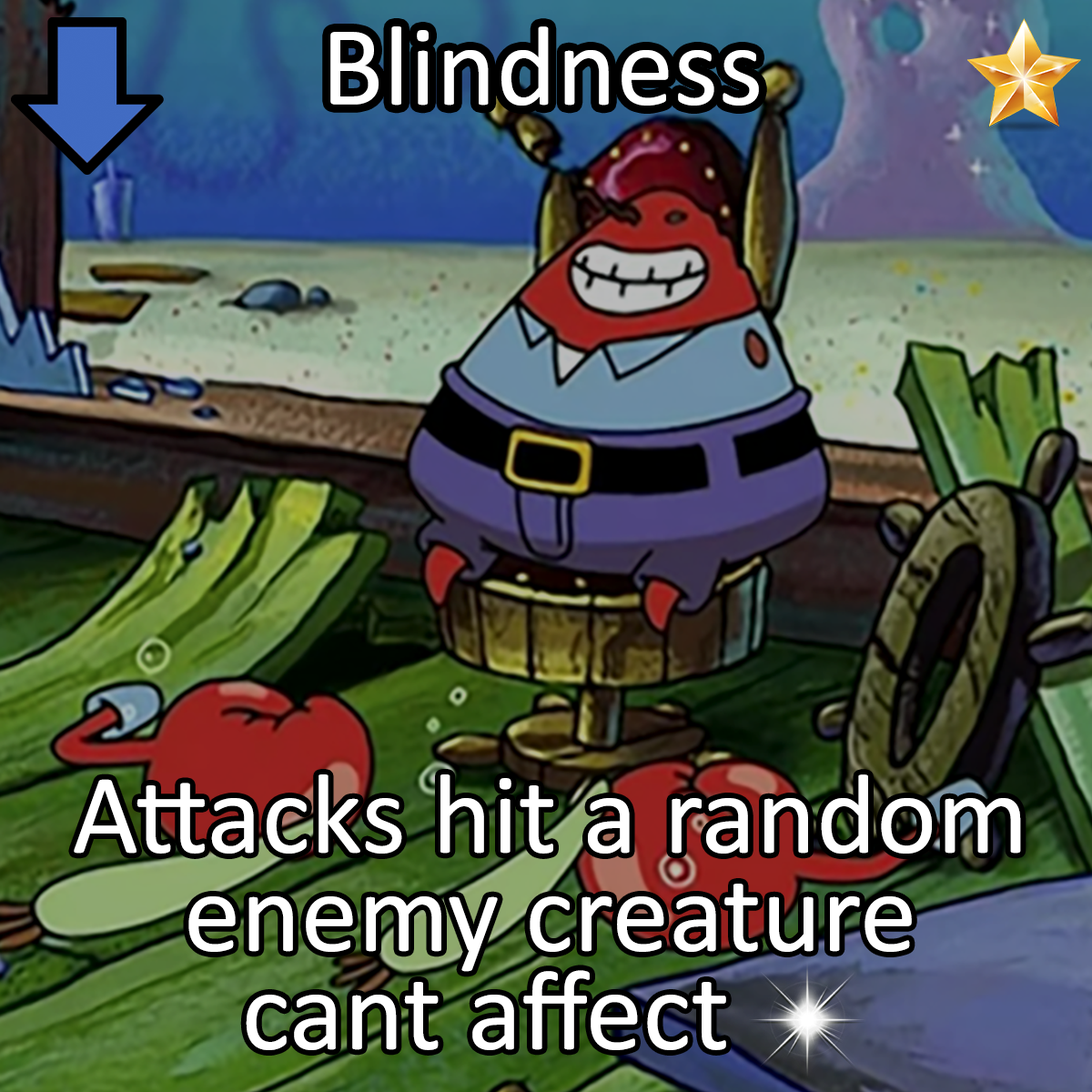
<style>
.page{position:relative;width:1092px;height:1092px}
.page>*{position:absolute;margin:0}
.t1{font:196.6px "Calibri";color:#ffffff}
.t2{font:196.6px/98.3px "Calibri";color:#ffffff}
</style>
<div class="page">
<p class="t1" style="left:330px;top:26px;width:429px;height:80px">Blindness</p>
<p class="t2" style="left:74px;top:774px;width:947px;height:276px;text-align:center">Attacks hit a random<br>enemy creature<br>cant affect</p>
</div>
